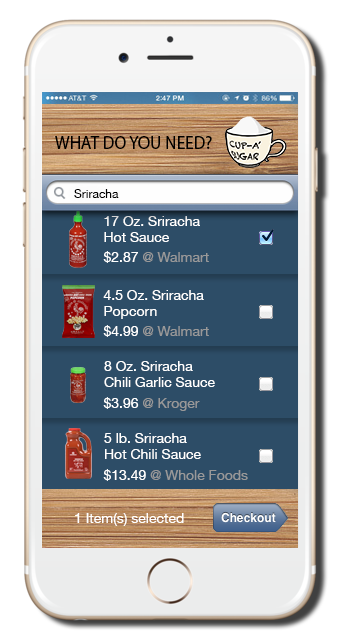
<style>
.page{position:relative;width:340px;height:640px;background:#2d4d67}
.page>*{position:absolute;margin:0}
.t1{font:18.4px "MyriadPro-Regular";color:#000000;scale:0.95 1}
.t2{font:12px "HelveticaNeue";color:#000000}
.t3{font:14px "HelveticaNeue";color:#ffffff}
.t4{font:14px "HelveticaNeue";color:#999999}
</style>
<div class="page">
<p class="t1" style="left:55px;top:136px;width:157px;height:13px">WHAT DO YOU NEED?</p>
<p class="t2" style="left:74px;top:189px;width:45px;height:9px">Sriracha</p>
<p class="t3" style="left:104px;top:216px;width:96px;height:26px">17 Oz. Sriracha<br>Hot Sauce</p>
<p class="t4" style="left:103px;top:251px;width:106px;height:12px"><span class="t3">$2.87 </span>@ Walmart</p>
<p class="t3" style="left:103px;top:290px;width:101px;height:29px">4.5 Oz. Sriracha<br>Popcorn</p>
<p class="t4" style="left:103px;top:325px;width:106px;height:12px"><span class="t3">$4.99 </span>@ Walmart</p>
<p class="t3" style="left:104px;top:361px;width:111px;height:26px">8 Oz. Sriracha<br>Chili Garlic Sauce</p>
<p class="t4" style="left:103px;top:397px;width:97px;height:14px"><span class="t3">$3.96 </span>@ Kroger</p>
<p class="t3" style="left:104px;top:433px;width:97px;height:26px">5 lb. Sriracha<br>Hot Chili Sauce</p>
<p class="t4" style="left:103px;top:469px;width:145px;height:12px"><span class="t3">$13.49 </span>@ Whole Foods</p>
<p class="t3" style="left:75px;top:513px;width:109px;height:13px">1 Item(s) selected</p>
</div>
